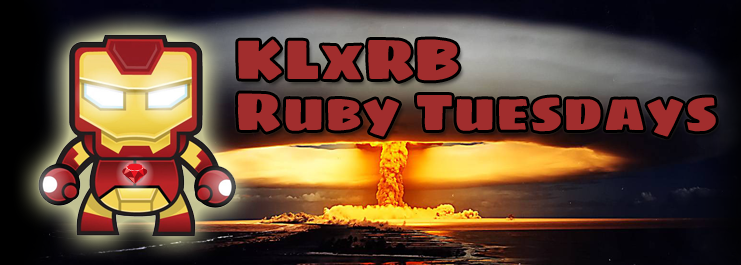
<style>
.page{position:relative;width:741px;height:265px}
.page>*{position:absolute;margin:0}
.t1{font:56.9px "SigmarOne";color:#a12d2d}
.t2{font:53.4px "SigmarOne";color:#a12d2d}
</style>
<div class="page">
<p class="t1" style="left:238px;top:39px;width:221px;height:42px">KLxRB</p>
<p class="t2" style="left:238px;top:93px;width:478px;height:44px">Ruby Tuesdays</p>
</div>
